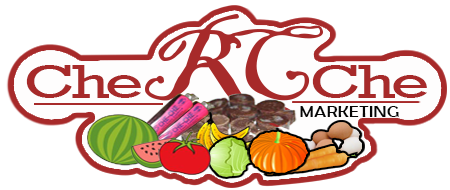
<style>
.page{position:relative;width:450px;height:190px;background:#ffffff}
.page>*{position:absolute;margin:0}
.t1{font:48.6px "Rockwell";letter-spacing:-0.06em;color:#a72a2a;scale:1.37 1}
.t2{font:15.6px "BerlinSansFB-Reg";letter-spacing:0.02em;color:#060606;scale:1.16 1}
</style>
<div class="page">
<p class="t1" style="left:26px;top:65px;width:115px;height:33px">Che</p>
<p class="t1" style="left:312px;top:65px;width:115px;height:33px">Che</p>
<p class="t2" style="left:300px;top:105px;width:99px;height:12px">MARKETING</p>
</div>
